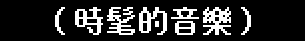
<style>
.page{position:relative;width:305px;height:41px;background:#000000}
.page>*{position:absolute;margin:0}
.t1{font:32px "MadouFutoMaruGothic";color:#ffffff}
</style>
<div class="page">
<p class="t1" style="left:55px;top:7px;width:196px;height:28px">（時髦的音樂）</p>
</div>
